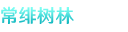
<style>
.page{position:relative;width:128px;height:32px;background:#ffffff}
.page>*{position:absolute;margin:0}
.t1{font:18.7px "HYWenHei-FEW";letter-spacing:0.025em}
</style>
<div class="page">
<p class="t1" style="left:1px;top:6px;width:73px;height:18px">常绯树林</p>
</div>
